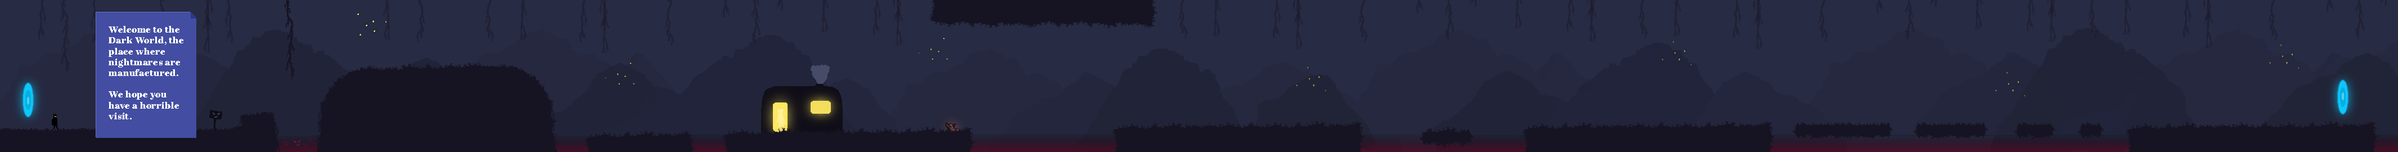
<style>
.page{position:relative;width:2398px;height:152px;background:#272b43}
.page>*{position:absolute;margin:0}
.t1{font:9px "AbrilFatface-Regular";letter-spacing:0.025em;color:#ffffff;scale:1.08 1}
</style>
<div class="page">
<p class="t1" style="left:109px;top:26px;width:74px;height:93px">Welcome to the Dark World, the place where nightmares are manufactured. <br><br>We hope you have a horrible visit.</p>
</div>
